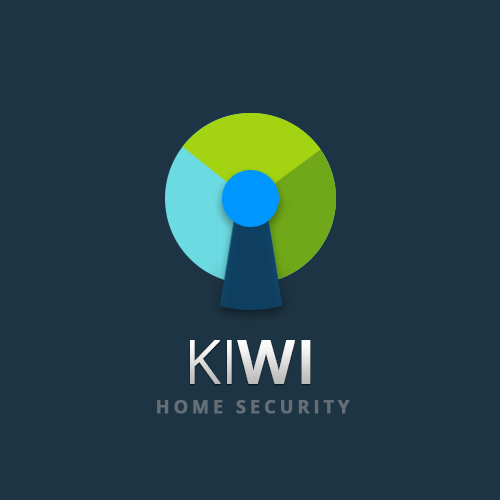
<style>
.page{position:relative;width:500px;height:500px;background:#1d3444}
.page>*{position:absolute;margin:0}
.t1{font:60px "OpenSans-Light";font-weight:bold}
.t2{font:60px "OpenSans-Semibold";font-weight:bold}
.t3{font:18px "OpenSans-Bold";letter-spacing:0.2em;color:#636e77;font-weight:bold}
</style>
<div class="page">
<p class="t1" style="left:190px;top:340px;width:121px;height:44px">KI<span class="t2">WI</span></p>
<p class="t3" style="left:157px;top:400px;width:193px;height:14px">HOME SECURITY</p>
</div>
